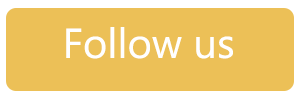
<style>
.page{position:relative;width:300px;height:100px;background:#ecc057}
.page>*{position:absolute;margin:0}
.t1{font:41.7px "Ebrima";color:#ffffff}
</style>
<div class="page">
<p class="t1" style="left:66px;top:27px;width:167px;height:32px">Follow us</p>
</div>
